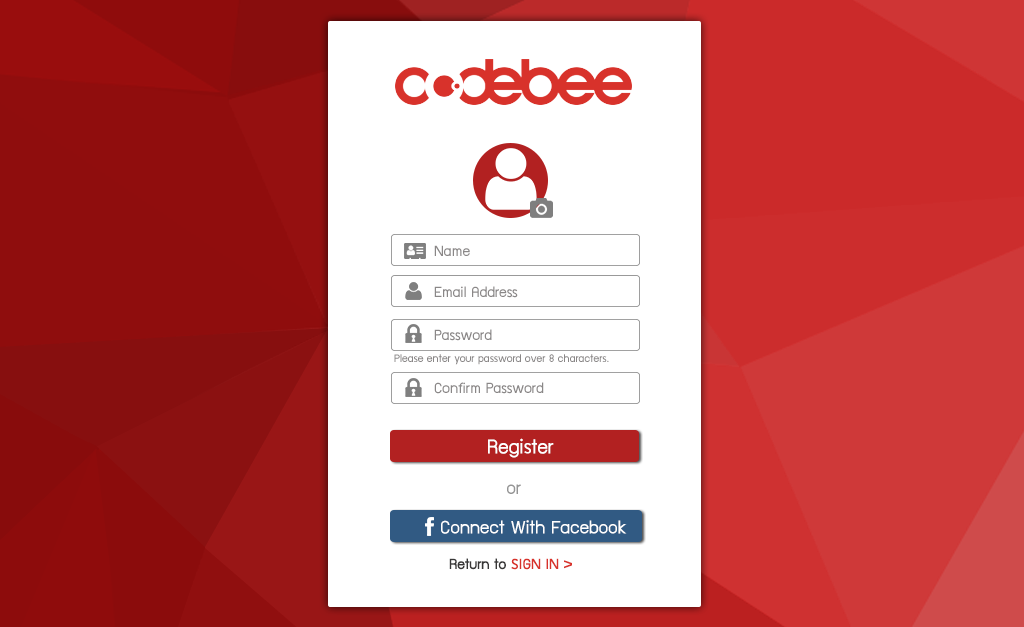
<style>
.page{position:relative;width:1024px;height:627px;background:#ffffff}
.page>*{position:absolute;margin:0}
.t1{font:16.7px "supermarket";color:#8a8787}
.t2{font:12.5px "supermarket";color:#8a8787}
.t3{font:22.9px "supermarket";color:#ffffff}
.t4{font:20.8px "supermarket";color:#959595}
.t5{font:20.8px "supermarket";color:#ffffff}
.t6{font:16.7px "supermarket";color:#383737}
.t7{font:16.7px "supermarket";color:#d8322b}
</style>
<div class="page">
<p class="t1" style="left:434px;top:245px;width:36px;height:11px">Name</p>
<p class="t1" style="left:434px;top:286px;width:84px;height:12px">Email Address</p>
<p class="t1" style="left:434px;top:329px;width:58px;height:12px">Password</p>
<p class="t2" style="left:394px;top:354px;width:215px;height:11px">Please enter your password over 8 characters.</p>
<p class="t1" style="left:434px;top:382px;width:110px;height:12px">Confirm Password</p>
<p class="t3" style="left:488px;top:438px;width:66px;height:20px">Register</p>
<p class="t4" style="left:507px;top:484px;width:14px;height:10px">or</p>
<p class="t5" style="left:441px;top:520px;width:186px;height:14px">Connect With Facebook</p>
<p class="t6" style="left:449px;top:558px;width:123px;height:12px">Return to <span class="t7">SIGN IN &gt;</span></p>
</div>
